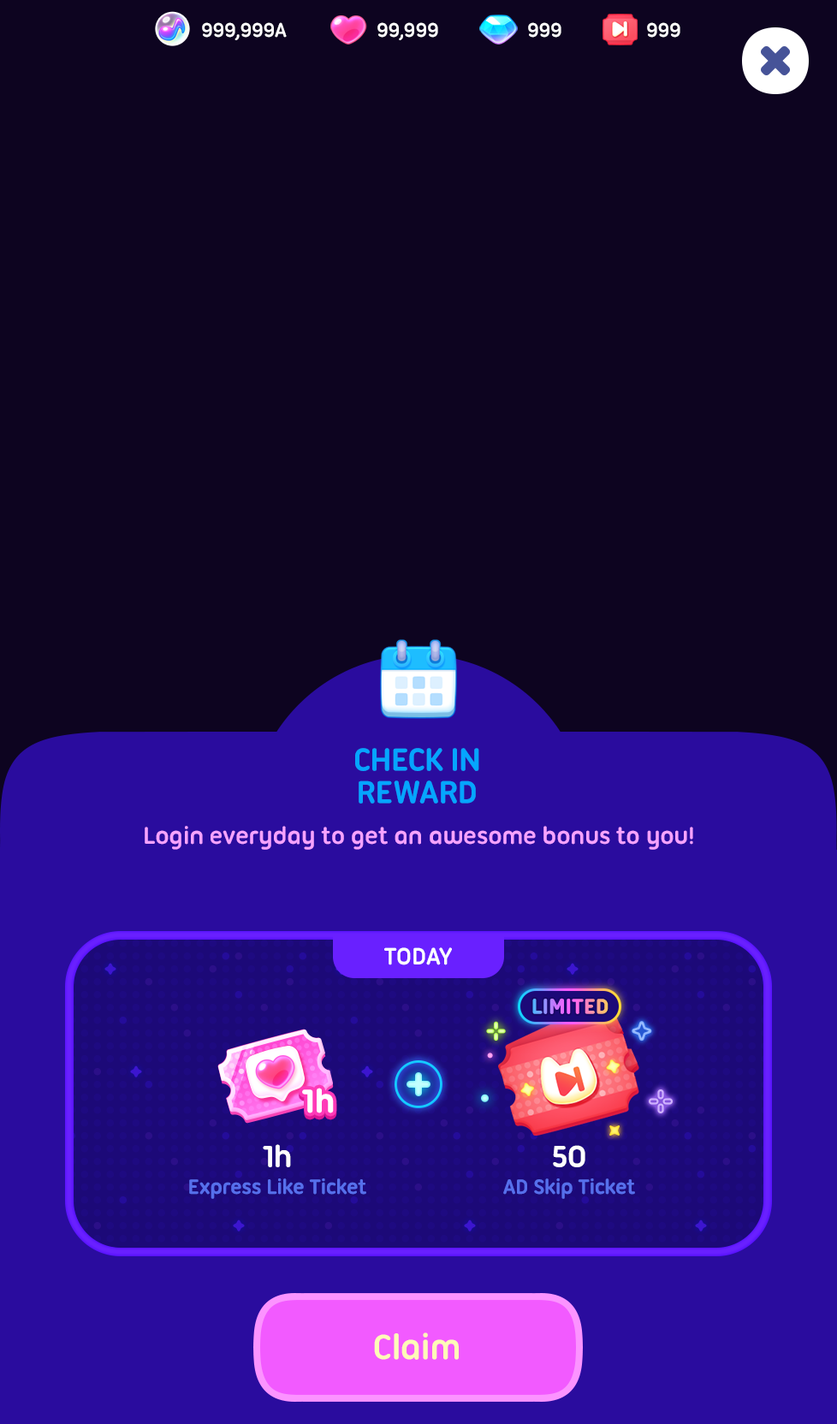
<style>
.page{position:relative;width:837px;height:1424px;background:#0d0420}
.page>*{position:absolute;margin:0}
.t1{font:21.4px "UbuntuTitling-Bold";letter-spacing:-0.025em;color:#ffffff}
.t2{font:34.2px/32.5px "UbuntuTitling-Bold";letter-spacing:-0.025em;color:#05a5ff;text-transform:uppercase}
.t3{font:25.7px "UbuntuTitling-Bold";letter-spacing:-0.025em;color:#f7a2ff}
.t4{font:25.7px "UbuntuTitling-Bold";letter-spacing:-0.025em;color:#ffffff;text-transform:uppercase}
.t5{font:22.3px "UbuntuTitling-Bold";letter-spacing:-0.01em;text-transform:uppercase;font-weight:bold}
.t6{font:34.2px "UbuntuTitling-Bold";letter-spacing:-0.025em;color:#ffffff;font-weight:bold}
.t7{font:32.5px "UbuntuTitling-Bold";letter-spacing:-0.025em;color:#ffffff}
.t8{font:22.3px "UbuntuTitling-Bold";letter-spacing:-0.025em;color:#566fec}
.t9{font:37.7px "UbuntuTitling-Bold";letter-spacing:-0.025em;color:#fefbb7}
</style>
<div class="page">
<p class="t1" style="left:202px;top:22px;width:85px;height:18px">999,999A</p>
<p class="t1" style="left:377px;top:22px;width:61px;height:18px">99,999</p>
<p class="t1" style="left:528px;top:22px;width:34px;height:16px">999</p>
<p class="t1" style="left:647px;top:22px;width:34px;height:16px">999</p>
<p class="t2" style="left:355px;top:748px;width:124px;height:56px;text-align:center">Check In<br>Reward</p>
<p class="t3" style="left:145px;top:826px;width:548px;height:24px">Login everyday to get an awesome bonus to you!</p>
<p class="t4" style="left:384px;top:948px;width:68px;height:18px">Today</p>
<p class="t5" style="left:532px;top:998px;width:77px;height:16px">Limited</p>
<p class="t6" style="left:302px;top:1088px;width:32px;height:26px">1h</p>
<p class="t7" style="left:263px;top:1144px;width:28px;height:24px">1h</p>
<p class="t7" style="left:553px;top:1145px;width:33px;height:23px">50</p>
<p class="t8" style="left:189px;top:1179px;width:177px;height:20px">Express Like Ticket</p>
<p class="t8" style="left:503px;top:1179px;width:132px;height:20px">AD Skip Ticket</p>
<p class="t9" style="left:374px;top:1333px;width:85px;height:27px">Claim</p>
</div>
